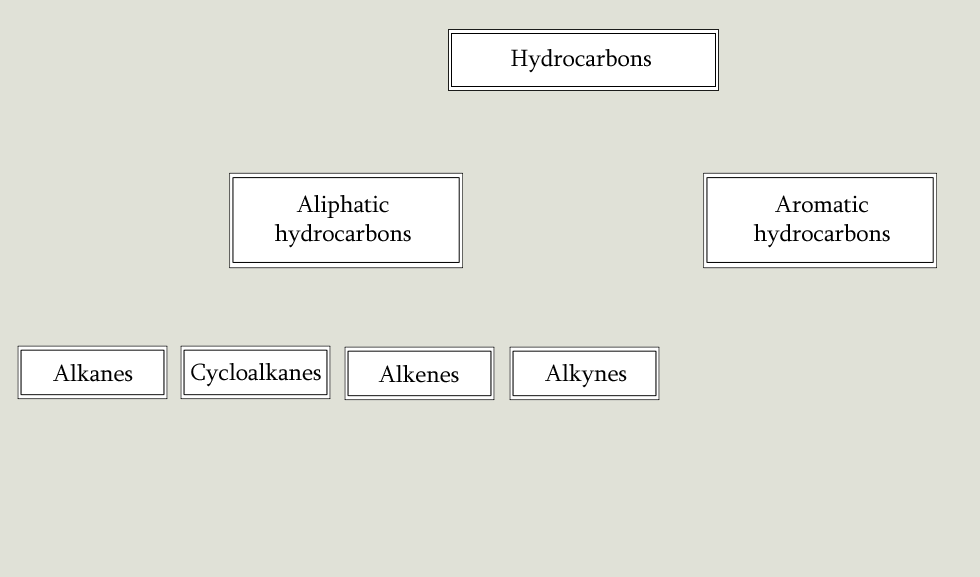
<style>
.page{position:relative;width:980px;height:577px;background:#e0e1d7}
.page>*{position:absolute;margin:0}
.t1{font:23.9px "Sylfaen";color:#000000}
</style>
<div class="page">
<p class="t1" style="left:511px;top:49px;width:140px;height:24px">Hydrocarbons</p>
<p class="t1" style="left:274px;top:195px;width:137px;height:53px;text-align:center">Aliphatic<br>hydrocarbons</p>
<p class="t1" style="left:753px;top:195px;width:137px;height:53px;text-align:center">Aromatic<br>hydrocarbons</p>
<p class="t1" style="left:53px;top:364px;width:80px;height:18px">Alkanes</p>
<p class="t1" style="left:191px;top:363px;width:130px;height:24px">Cycloalkanes</p>
<p class="t1" style="left:378px;top:365px;width:81px;height:18px">Alkenes</p>
<p class="t1" style="left:545px;top:364px;width:82px;height:24px">Alkynes</p>
</div>
